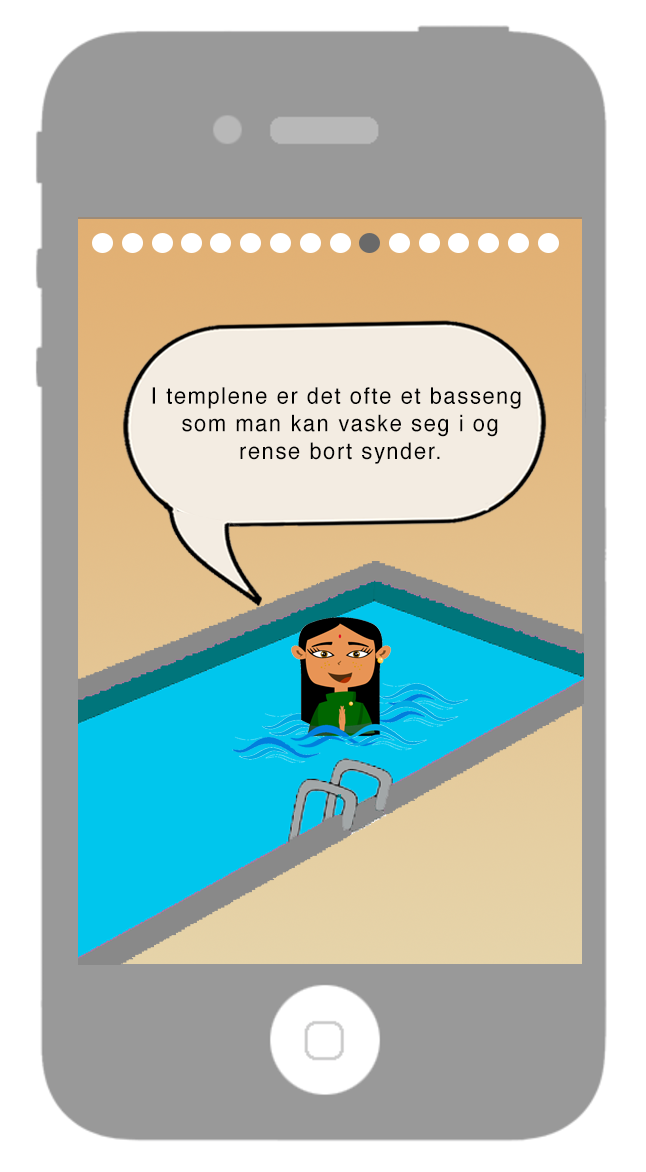
<style>
.page{position:relative;width:646px;height:1172px;background:#999999}
.page>*{position:absolute;margin:0}
.t1{font:11px "Helvetica";letter-spacing:0.075em;color:#010101;scale:0.95 1}
</style>
<div class="page">
<p class="t1" style="left:152px;top:387px;width:369px;height:77px;text-align:center">I templene er det ofte et basseng <br>som man kan vaske seg i og<br>rense bort synder.</p>
</div>
